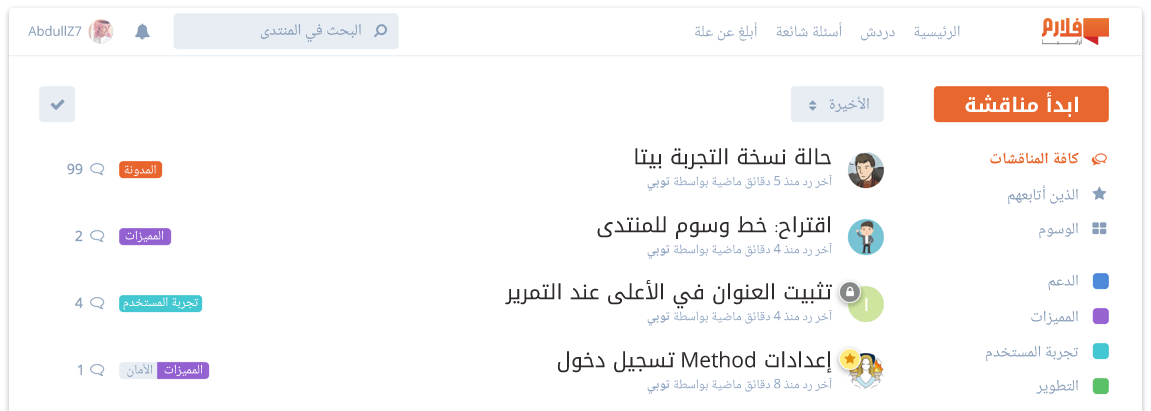
<style>
.page{position:relative;width:1151px;height:411px;background:#ffffff}
.page>*{position:absolute;margin:0}
.t1{font:13px "OpenSans";color:#849ab5}
.t2{font:16px "NotoNaskhArabic";color:#849ab5}
.t3{font:16px "NotoNaskhArabic";color:#98aac1}
.t4{font:20px "NotoKufiArabic-Bold";color:#ffffff}
.t5{font:21px "NotoKufiArabic";color:#2e292a}
.t6{font:16px "NotoNaskhArabic-Bold";color:#e7672e}
.t7{font:13px "NotoNaskhArabic";color:#fcf8ff}
.t8{font:13px "NotoNaskhArabic";color:#92a7c4}
.t9{font:13px "NotoNaskhArabic-Bold";color:#92a7c4}
.t10{font:16px "NotoNaskhArabic";color:#889eb9}
.t11{font:13px "NotoNaskhArabic";color:#ffffff}
.t12{font:21px "OpenSans";color:#2e292a}
.t13{font:13px "NotoNaskhArabic";color:#8ba1bd}
</style>
<div class="page">
<p class="t1" style="left:28px;top:25px;width:54px;height:11px">AbdullZ7</p>
<p class="t2" style="left:260px;top:24px;width:101px;height:18px">البحث في المنتدى</p>
<p class="t3" style="left:695px;top:22px;width:265px;height:19px">الرئيسية     دردش     أسئلة شائعة     أبلغ عن علة</p>
<p class="t2" style="left:829px;top:96px;width:40px;height:16px">الأخيرة</p>
<p class="t4" style="left:965px;top:92px;width:113px;height:25px">ابدأ مناقشة</p>
<p class="t5" style="left:635px;top:148px;width:196px;height:22px">حالة نسخة التجربة بيتا</p>
<p class="t6" style="left:990px;top:152px;width:89px;height:12px">كافة المناقشات</p>
<p class="t7" style="left:124px;top:164px;width:32px;height:13px">المدونة</p>
<p class="t8" style="left:647px;top:174px;width:186px;height:17px">آخر رد منذ 5 دقائق ماضية بواسطة <span class="t9">توبي</span></p>
<p class="t10" style="left:1008px;top:185px;width:70px;height:20px">الذين أتابعهم</p>
<p class="t5" style="left:597px;top:216px;width:233px;height:23px">اقتراح: خط وسوم للمنتدى</p>
<p class="t10" style="left:1039px;top:222px;width:39px;height:17px">الوسوم</p>
<p class="t11" style="left:125px;top:230px;width:39px;height:13px">المميزات</p>
<p class="t8" style="left:647px;top:242px;width:186px;height:17px">آخر رد منذ 4 دقائق ماضية بواسطة <span class="t9">توبي</span></p>
<p class="t5" style="left:505px;top:280px;width:327px;height:29px">تثبيت العنوان في الأعلى عند التمرير</p>
<p class="t10" style="left:1048px;top:274px;width:30px;height:17px">الدعم</p>
<p class="t11" style="left:123px;top:297px;width:75px;height:13px">تجربة المستخدم</p>
<p class="t8" style="left:647px;top:309px;width:186px;height:17px">آخر رد منذ 4 دقائق ماضية بواسطة <span class="t9">توبي</span></p>
<p class="t10" style="left:1031px;top:310px;width:47px;height:15px">المميزات</p>
<p class="t5" style="left:557px;top:351px;width:275px;height:22px">إعدادات <span class="t12">Method </span>تسجيل دخول</p>
<p class="t10" style="left:986px;top:345px;width:92px;height:17px">تجربة المستخدم</p>
<p class="t13" style="left:127px;top:363px;width:26px;height:14px">الأمان</p>
<p class="t11" style="left:164px;top:364px;width:39px;height:13px">المميزات</p>
<p class="t8" style="left:647px;top:377px;width:186px;height:17px">آخر رد منذ 8 دقائق ماضية بواسطة <span class="t9">توبي</span></p>
<p class="t10" style="left:1036px;top:379px;width:42px;height:15px">التطوير</p>
</div>
